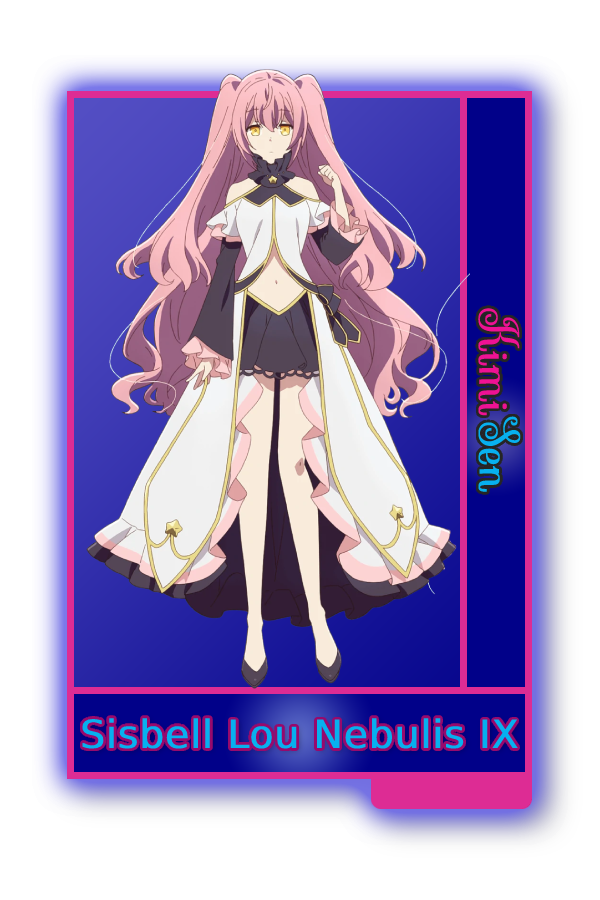
<style>
.page{position:relative;width:600px;height:900px;background:#ffffff}
.page>*{position:absolute;margin:0}
.t1{font:48.8px "Sevillana-Regular";color:#ee1294;font-weight:bold}
.t2{font:48.8px "Sevillana-Regular";color:#07b0ef;font-weight:bold}
.t3{font:39px "CoolveticaRg-Regular";color:#07b0ef;font-weight:bold}
</style>
<div class="page">
<p class="t1" style="left:478px;top:308px;width:43px;height:184px;rotate:90deg">Kimi<span class="t2">Sen</span></p>
<p class="t3" style="left:82px;top:718px;width:436px;height:31px">Sisbell Lou Nebulis IX</p>
</div>
